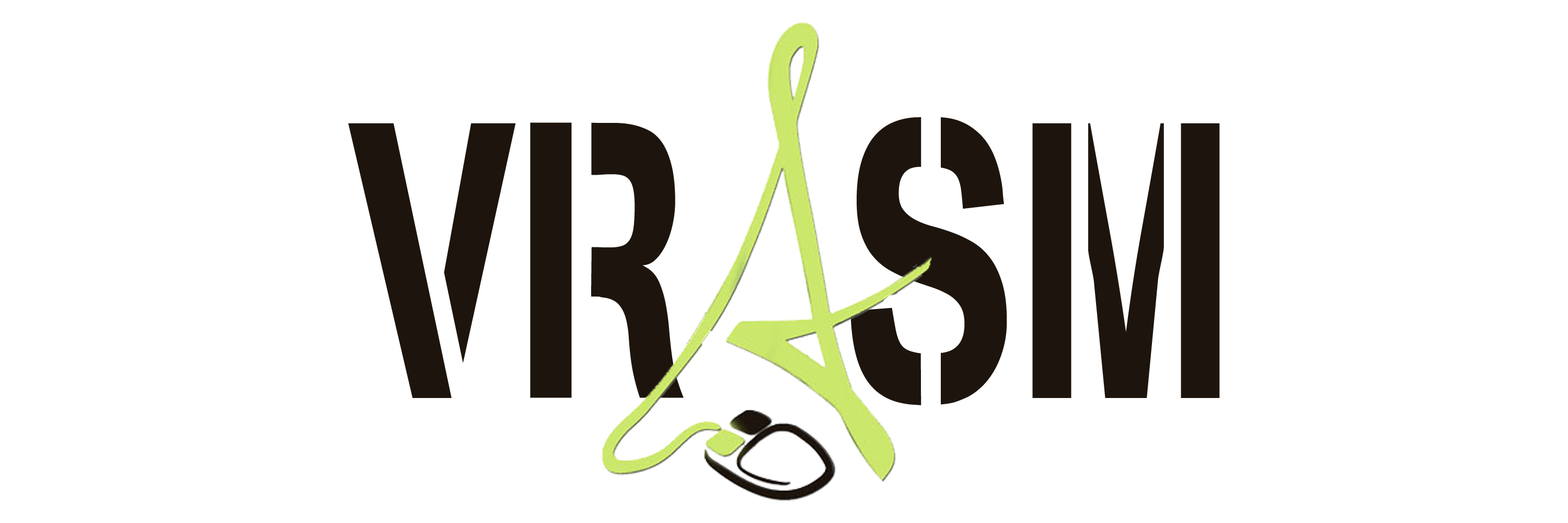
<style>
.page{position:relative;width:1568px;height:523px;background:#ffffff}
.page>*{position:absolute;margin:0}
.t1{font:392px "Stencilia-A";color:#1d150d;scale:0.67 1}
</style>
<div class="page">
<p class="t1" style="left:348px;top:117px;width:872px;height:288px">VR  SM</p>
</div>
